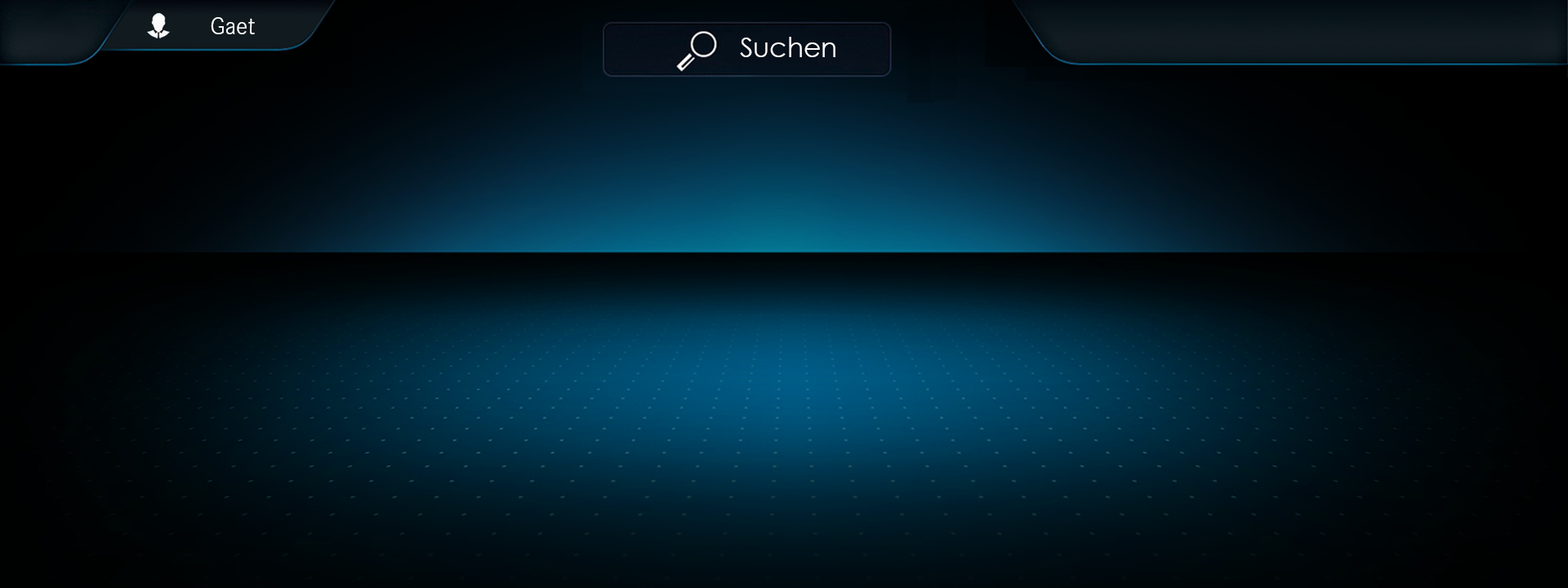
<style>
.page{position:relative;width:1568px;height:588px}
.page>*{position:absolute;margin:0}
.t1{font:24.5px "CorporateS-Light";color:#ffffff}
.t2{font:26.9px "CenturyGothic";color:#ffffff}
</style>
<div class="page">
<p class="t1" style="left:211px;top:17px;width:44px;height:17px">Gaet</p>
<p class="t2" style="left:740px;top:37px;width:95px;height:20px">Suchen</p>
</div>
